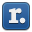
<style>
.page{position:relative;width:32px;height:32px;background:#ffffff}
.page>*{position:absolute;margin:0}
.t1{font:30px "BookmanOldStyle-Bold";color:#ffffff}
</style>
<div class="page">
<p class="t1" style="left:9px;top:8px;width:17px;height:16px">r.</p>
</div>
